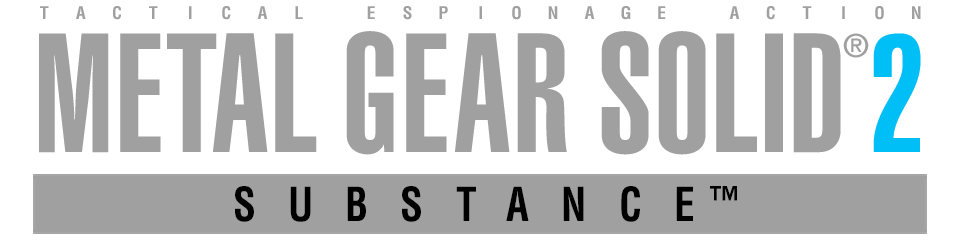
<style>
.page{position:relative;width:960px;height:246px;background:#ffffff}
.page>*{position:absolute;margin:0}
.t1{font:16.9px "Helvetica-Condensed-Bold";letter-spacing:0.048em;color:#a0a0a0;scale:1.05 1}
.t2{font:166.5px "Helvetica-UltraCompressed";letter-spacing:0.048em;color:#a0a0a0}
.t3{font:32.3px "Helvetica-UltraCompressed";letter-spacing:0.048em;color:#a0a0a0}
.t4{font:164.7px "Helvetica-UltraCompressed";letter-spacing:0.048em;color:#00bef6}
.t5{font:45.6px "Helvetica-Condensed-Bold";letter-spacing:0.78em;color:#000000;scale:0.91 1}
.t6{font:36.1px "Helvetica-Condensed-Bold";letter-spacing:0.78em;color:#000000;scale:0.97 1}
</style>
<div class="page">
<p class="t1" style="left:40px;top:6px;width:9px;height:13px">T</p>
<p class="t1" style="left:76px;top:6px;width:10px;height:13px">A</p>
<p class="t1" style="left:113px;top:6px;width:8px;height:14px">C</p>
<p class="t1" style="left:149px;top:6px;width:9px;height:13px">T</p>
<p class="t1" style="left:189px;top:6px;width:3px;height:13px">I</p>
<p class="t1" style="left:222px;top:6px;width:9px;height:14px">C</p>
<p class="t1" style="left:257px;top:6px;width:11px;height:13px">A</p>
<p class="t1" style="left:295px;top:6px;width:8px;height:13px">L</p>
<p class="t1" style="left:367px;top:6px;width:8px;height:13px">E</p>
<p class="t1" style="left:403px;top:6px;width:9px;height:14px">S</p>
<p class="t1" style="left:439px;top:6px;width:9px;height:13px">P</p>
<p class="t1" style="left:479px;top:6px;width:3px;height:13px">I</p>
<p class="t1" style="left:512px;top:6px;width:9px;height:14px">O</p>
<p class="t1" style="left:548px;top:6px;width:10px;height:13px">N</p>
<p class="t1" style="left:584px;top:6px;width:11px;height:13px">A</p>
<p class="t1" style="left:621px;top:6px;width:10px;height:14px">G</p>
<p class="t1" style="left:658px;top:6px;width:8px;height:13px">E</p>
<p class="t1" style="left:729px;top:6px;width:11px;height:13px">A</p>
<p class="t1" style="left:766px;top:6px;width:9px;height:14px">C</p>
<p class="t1" style="left:802px;top:6px;width:10px;height:13px">T</p>
<p class="t1" style="left:842px;top:6px;width:3px;height:13px">I</p>
<p class="t1" style="left:875px;top:6px;width:9px;height:14px">O</p>
<p class="t1" style="left:912px;top:6px;width:9px;height:13px">N</p>
<p class="t2" style="left:39px;top:33px;width:70px;height:120px">M</p>
<p class="t2" style="left:120px;top:33px;width:41px;height:119px">E</p>
<p class="t2" style="left:167px;top:33px;width:50px;height:119px">T</p>
<p class="t2" style="left:213px;top:33px;width:55px;height:119px">A</p>
<p class="t2" style="left:275px;top:33px;width:42px;height:119px">L</p>
<p class="t2" style="left:346px;top:31px;width:48px;height:124px">G</p>
<p class="t2" style="left:406px;top:33px;width:41px;height:119px">E</p>
<p class="t2" style="left:455px;top:33px;width:55px;height:119px">A</p>
<p class="t2" style="left:517px;top:33px;width:50px;height:119px">R</p>
<p class="t2" style="left:601px;top:31px;width:48px;height:124px">S</p>
<p class="t2" style="left:658px;top:31px;width:48px;height:124px">O</p>
<p class="t2" style="left:716px;top:33px;width:41px;height:119px">L</p>
<p class="t2" style="left:765px;top:33px;width:18px;height:119px">I</p>
<p class="t2" style="left:793px;top:33px;width:48px;height:120px">D</p>
<p class="t3" style="left:843px;top:33px;width:26px;height:25px">®</p>
<p class="t4" style="left:873px;top:33px;width:48px;height:119px">2</p>
<p class="t5" style="left:235px;top:186px;width:458px;height:36px">SUBSTANCE</p>
<p class="t6" style="left:710px;top:186px;width:27px;height:15px">™</p>
</div>
